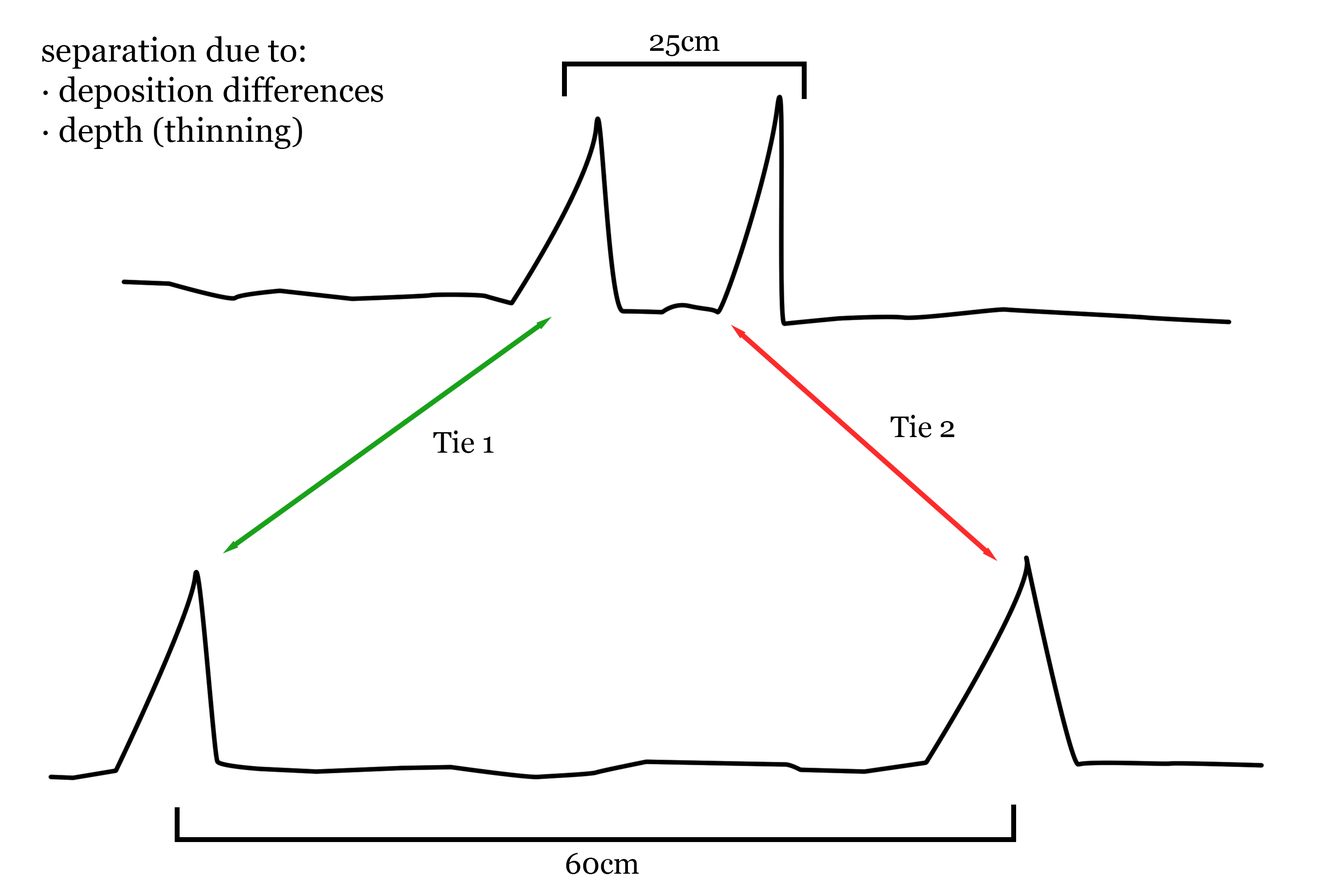
<style>
.page{position:relative;width:1337px;height:892px;background:#ffffff}
.page>*{position:absolute;margin:0}
.t1{font:33.4px "Georgia";color:#000000}
.t2{font:29.7px "Georgia";color:#000000}
</style>
<div class="page">
<p class="t1" style="left:42px;top:36px;width:341px;height:113px">separation due to:<br>∙ deposition differences<br>∙ depth (thinning)</p>
<p class="t2" style="left:650px;top:35px;width:70px;height:21px">25cm</p>
<p class="t2" style="left:891px;top:415px;width:64px;height:22px">Tie 2</p>
<p class="t2" style="left:433px;top:430px;width:61px;height:23px">Tie 1</p>
<p class="t2" style="left:566px;top:852px;width:73px;height:22px">60cm</p>
</div>
